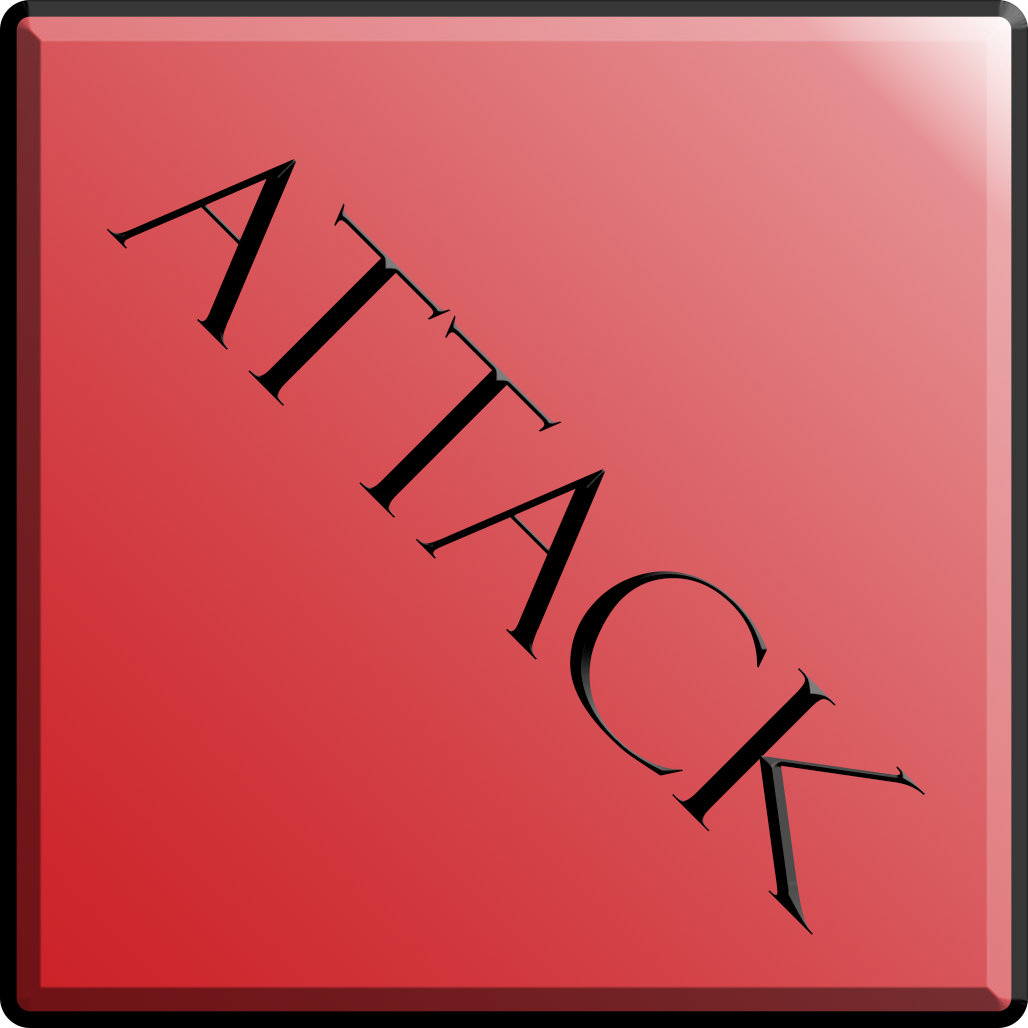
<style>
.page{position:relative;width:1028px;height:1028px}
.page>*{position:absolute;margin:0}
.t1{font:250px "FelixTitlingMT";color:#000000}
</style>
<div class="page">
<p class="t1" style="left:106px;top:159px;width:819px;height:776px;rotate:45deg">Attack</p>
</div>
